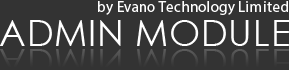
<style>
.page{position:relative;width:289px;height:70px;background:#333333}
.page>*{position:absolute;margin:0}
.t1{font:15px "MyriadPro-Regular";letter-spacing:0.02em;color:#ffffff}
.t2{font:36px "CenturyGothic";letter-spacing:0.02em;color:#ffffff}
.t3{font:36px "CenturyGothic";letter-spacing:0.02em;color:#494949}
</style>
<div class="page">
<p class="t1" style="left:98px;top:1px;width:190px;height:14px">by Evano Technology Limited</p>
<p class="t2" style="left:0px;top:20px;width:289px;height:26px">ADMIN MODULE</p>
<p class="t3" style="left:0px;top:49px;width:289px;height:18px">ADMIN MODULE</p>
</div>
